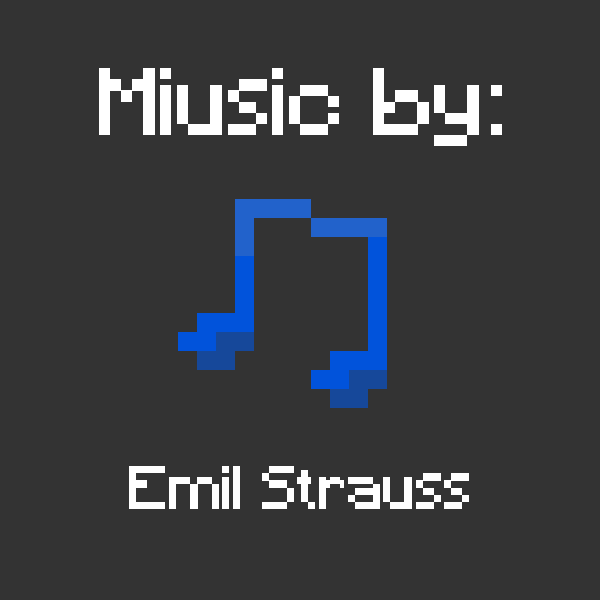
<style>
.page{position:relative;width:600px;height:600px;background:#333333}
.page>*{position:absolute;margin:0}
.t1{font:89.5px "Minecraft";color:#ffffff}
.t2{font:57.3px "Minecraft";color:#ffffff}
</style>
<div class="page">
<p class="t1" style="left:99px;top:68px;width:403px;height:78px">Miusic by:</p>
<p class="t2" style="left:129px;top:466px;width:340px;height:43px">Emil Strauss</p>
</div>
